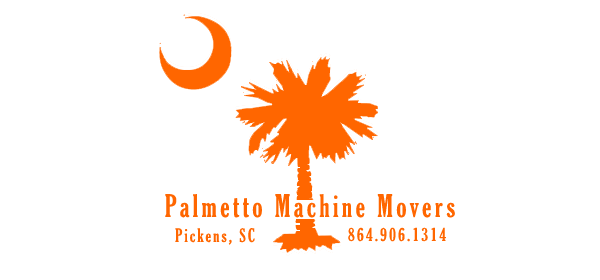
<style>
.page{position:relative;width:600px;height:280px;background:#ffffff}
.page>*{position:absolute;margin:0}
.t1{font:30px "GloucesterMT-ExtraCondensed";letter-spacing:0.125em;color:#ff6600}
.t2{font:18px "GloucesterMT-ExtraCondensed";letter-spacing:0.125em;color:#ff6600}
</style>
<div class="page">
<p class="t1" style="left:165px;top:194px;width:290px;height:24px">Palmetto Machine Movers</p>
<p class="t2" style="left:175px;top:228px;width:80px;height:17px">Pickens, SC</p>
<p class="t2" style="left:348px;top:227px;width:98px;height:15px">864.906.1314</p>
</div>
